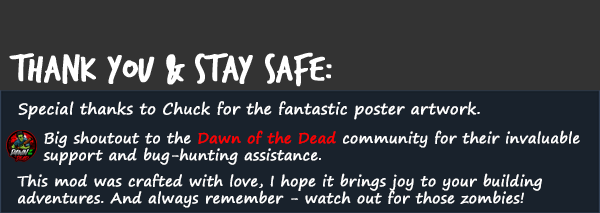
<style>
.page{position:relative;width:600px;height:213px;background:#19222c}
.page>*{position:absolute;margin:0}
.t1{font:39.2px "TrashHand";color:#ffffff;font-weight:bold}
.t2{font:15.1px "SegoePrint";color:#ffffff;font-weight:bold}
.t3{font:14.3px "SegoePrint";color:#ffffff;font-weight:bold}
.t4{font:14.3px "SegoePrint";color:#ff0000;font-weight:bold}
</style>
<div class="page">
<p class="t1" style="left:9px;top:52px;width:323px;height:35px">Thank You &amp; Stay Safe:</p>
<p class="t2" style="left:18px;top:101px;width:462px;height:19px">Special thanks to Chuck for the fantastic poster artwork.</p>
<p class="t3" style="left:43px;top:130px;width:537px;height:35px">Big shoutout to the <span class="t4">Dawn of the Dead</span> community for their invaluable <br>support and bug-hunting assistance.</p>
<p class="t3" style="left:17px;top:173px;width:525px;height:35px">This mod was crafted with love, I hope it brings joy to your building <br>adventures. And always remember - watch out for those zombies!</p>
</div>
